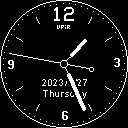
<style>
.page{position:relative;width:128px;height:128px;background:#000000}
.page>*{position:absolute;margin:0}
.t1{font:16px "PixelOperatorMono-Bold";color:#ffffff}
.t2{font:9px "ArialMT";letter-spacing:0.09em;color:#ffffff}
</style>
<div class="page">
<p class="t1" style="left:8px;top:60px;width:6px;height:9px">9</p>
<p class="t1" style="left:114px;top:58px;width:6px;height:9px">3</p>
<p class="t2" style="left:42px;top:79px;width:45px;height:20px;text-align:center">2023/4/27<br>Thursday</p>
<p class="t1" style="left:62px;top:111px;width:6px;height:9px">6</p>
</div>
